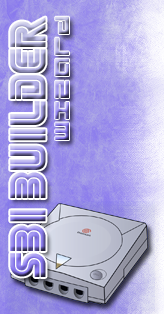
<style>
.page{position:relative;width:164px;height:314px}
.page>*{position:absolute;margin:0}
.t1{font:36px "SEGA";letter-spacing:0.025em}
</style>
<div class="page">
<p class="t1" style="left:10px;top:17px;width:36px;height:260px;rotate:-90deg">sbi builder</p>
</div>
